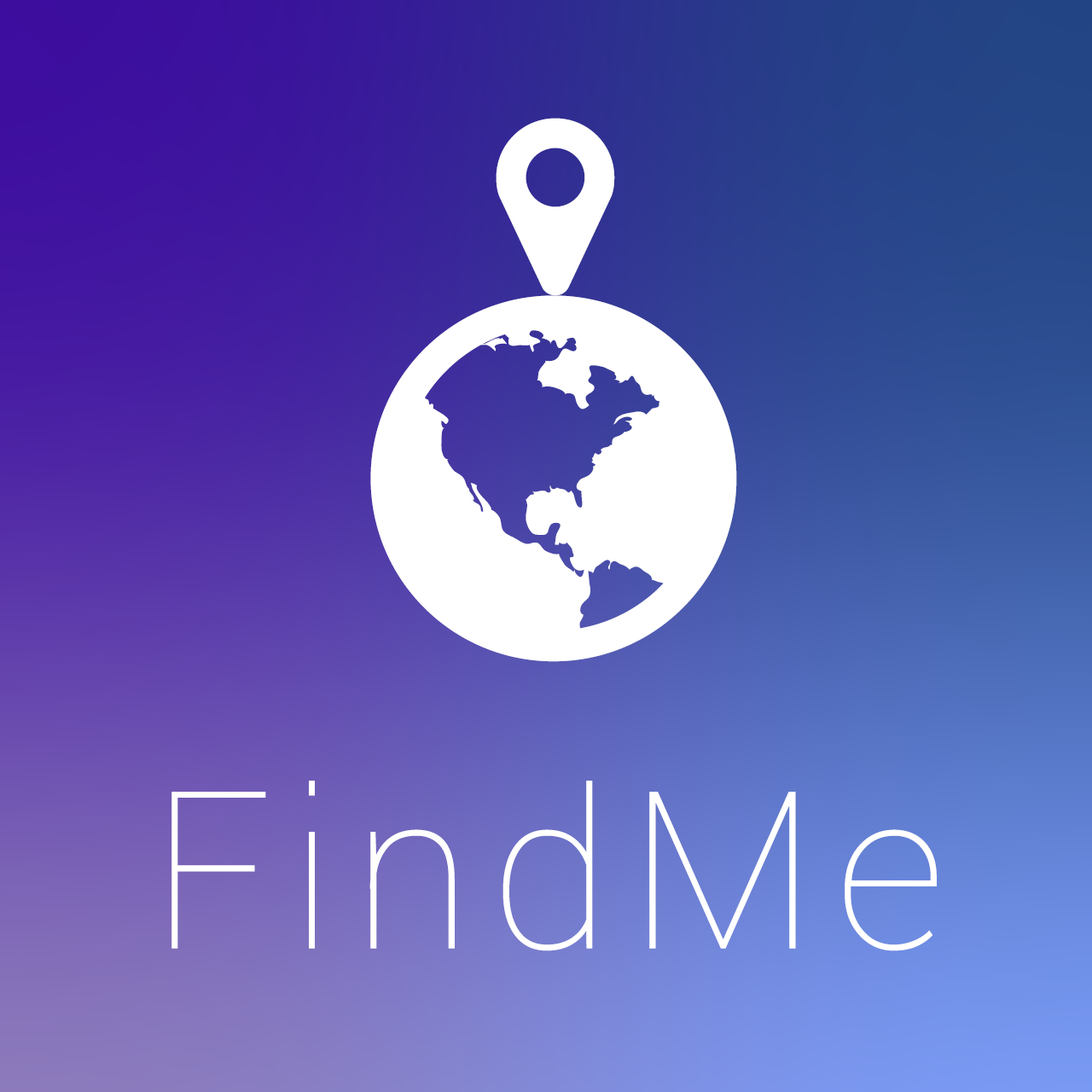
<style>
.page{position:relative;width:1092px;height:1092px}
.page>*{position:absolute;margin:0}
.t1{font:220.1px "Roboto-Thin";letter-spacing:0.08em;color:#ffffff}
</style>
<div class="page">
<p class="t1" style="left:171px;top:781px;width:766px;height:170px">FindMe</p>
</div>
